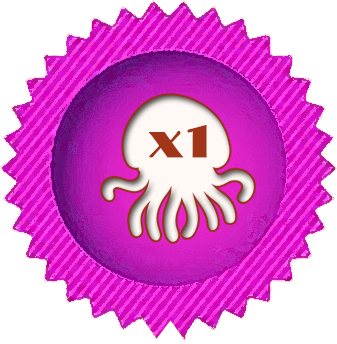
<style>
.page{position:relative;width:337px;height:344px;background:#ffffff}
.page>*{position:absolute;margin:0}
.t1{font:45.8px "Broadway";color:#a13517;font-weight:bold}
</style>
<div class="page">
<p class="t1" style="left:149px;top:125px;width:58px;height:33px">x1</p>
</div>
